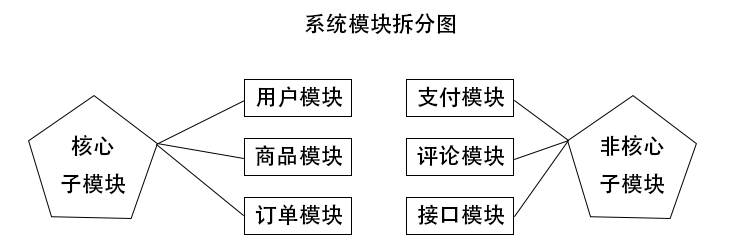
<style>
.page{position:relative;width:729px;height:250px;background:#ffffff}
.page>*{position:absolute;margin:0}
.t1{font:22px "AdobeHeitiStd-Regular";color:#000000}
.t2{font:22px "AdobeHeitiStd-Regular";color:#000001}
</style>
<div class="page">
<p class="t1" style="left:305px;top:13px;width:151px;height:22px">系统模块拆分图</p>
<p class="t2" style="left:256px;top:86px;width:86px;height:22px">用户模块</p>
<p class="t2" style="left:418px;top:86px;width:86px;height:22px">支付模块</p>
<p class="t1" style="left:61px;top:135px;width:64px;height:60px;text-align:center">核心<br>子模块</p>
<p class="t1" style="left:600px;top:135px;width:64px;height:60px;text-align:center">非核心<br>子模块</p>
<p class="t2" style="left:255px;top:145px;width:87px;height:22px">商品模块</p>
<p class="t2" style="left:417px;top:145px;width:87px;height:22px">评论模块</p>
<p class="t2" style="left:255px;top:204px;width:87px;height:22px">订单模块</p>
<p class="t2" style="left:418px;top:204px;width:86px;height:22px">接口模块</p>
</div>
